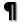
<style>
.page{position:relative;width:24px;height:24px;background:#ffffff}
.page>*{position:absolute;margin:0}
.t1{font:24.3px "Calibri-Bold";letter-spacing:-0.005em;color:#000000}
</style>
<div class="page">
<p class="t1" style="left:4px;top:2px;width:12px;height:18px">¶</p>
</div>
